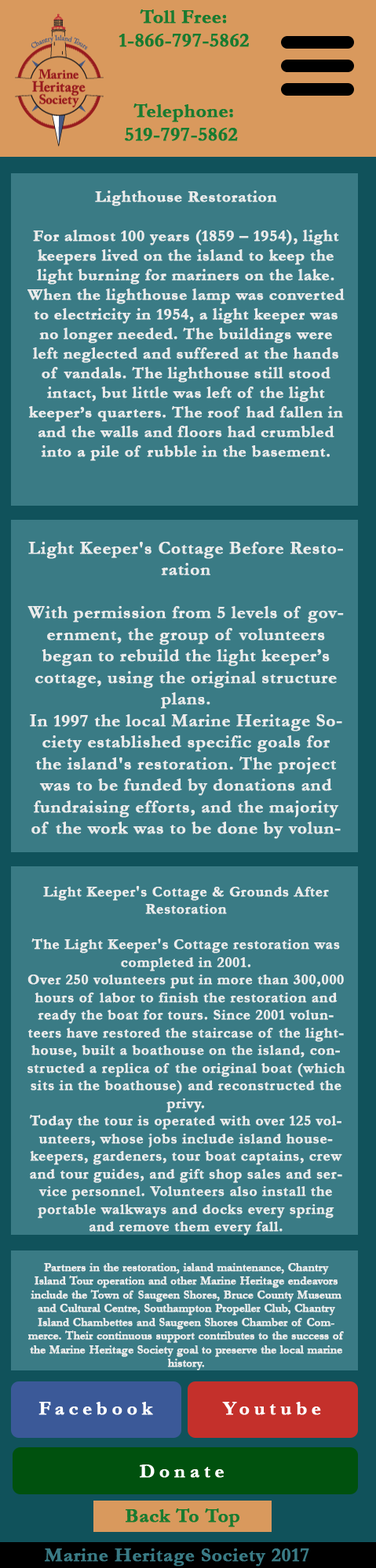
<style>
.page{position:relative;width:376px;height:1568px;background:#3a7b85}
.page>*{position:absolute;margin:0}
.t1{font:19.6px "Garamond-Bold";color:#197b30;font-weight:bold}
.t2{font:16.3px "Garamond-Bold";color:#ebebeb;font-weight:bold}
.t3{font:13.1px "Garamond-Bold";color:#ebebeb;font-weight:bold}
.t4{font:18px "Garamond-Bold";color:#ebebeb;font-weight:bold}
.t5{font:14.7px "Garamond-Bold";color:#ebebeb;font-weight:bold}
.t6{font:11.4px "Garamond-Bold";color:#ebebeb;font-weight:bold}
.t7{font:9.8px "Garamond-Bold";color:#ebebeb;font-weight:bold}
.t8{font:19.6px "Garamond-Bold";letter-spacing:0.2em;color:#fefefe;font-weight:bold}
.t9{font:19.6px "Garamond-Bold";letter-spacing:0.2em;color:#ffffff;font-weight:bold}
.t10{font:19.6px "Garamond-Bold";color:#3a7b85;font-weight:bold}
</style>
<div class="page">
<p class="t1" style="left:118px;top:9px;width:131px;height:38px;text-align:center">Toll Free:<br>1-866-797-5862</p>
<p class="t1" style="left:125px;top:103px;width:113px;height:38px;text-align:center">Telephone:<br>519-797-5862</p>
<p class="t2" style="left:27px;top:191px;width:317px;height:270px;text-align:center"><span class="t3"><br></span>Lighthouse Restoration<br><br>For almost 100 years (1859 – 1954), light keepers lived on the island to keep the light burning for mariners on the lake. When the lighthouse lamp was converted to electricity in 1954, a light keeper was no longer needed. The buildings were left neglected and suffered at the hands of vandals. The lighthouse still stood intact, but little was left of the light keeper’s quarters. The roof had fallen in and the walls and floors had crumbled into a pile of rubble in the basement.</p>
<p class="t4" style="left:27px;top:542px;width:316px;height:297px;text-align:center">Light Keeper's Cottage Before Restoration<br><br>With permission from 5 levels of government, the group of volunteers began to rebuild the light keeper’s cottage, using the original structure plans.<br>In 1997 the local Marine Heritage Society established specific goals for the island's restoration. The project was to be funded by donations and fundraising efforts, and the majority of the work was to be done by volunteers.</p>
<p class="t5" style="left:27px;top:886px;width:318px;height:350px;text-align:center"><span class="t4"><br></span>Light Keeper's Cottage &amp; Grounds After Restoration<br><br>The Light Keeper's Cottage restoration was completed in 2001. <br>Over 250 volunteers put in more than 300,000 hours of labor to finish the restoration and ready the boat for tours. Since 2001 volunteers have restored the staircase of the lighthouse, built a boathouse on the island, constructed a replica of the original boat (which sits in the boathouse) and reconstructed the privy.<br>Today the tour is operated with over 125 volunteers, whose jobs include island housekeepers, gardeners, tour boat captains, crew and tour guides, and gift shop sales and service personnel. Volunteers also install the portable walkways and docks every spring and remove them every fall.</p>
<p class="t6" style="left:27px;top:1263px;width:316px;height:107px;text-align:center"><span class="t7"><br></span>Partners in the restoration, island maintenance, Chantry Island Tour operation and other Marine Heritage endeavors include the Town of Saugeen Shores, Bruce County Museum and Cultural Centre, Southampton Propeller Club, Chantry Island Chambettes and Saugeen Shores Chamber of Commerce. Their continuous support contributes to the success of the Marine Heritage Society goal to preserve the local marine history.</p>
<p class="t8" style="left:38px;top:1402px;width:115px;height:13px">Facebook</p>
<p class="t9" style="left:222px;top:1402px;width:99px;height:13px">Youtube</p>
<p class="t9" style="left:140px;top:1465px;width:83px;height:13px">Donate</p>
<p class="t1" style="left:125px;top:1508px;width:114px;height:19px">Back To Top</p>
<p class="t10" style="left:45px;top:1548px;width:264px;height:18px">Marine Heritage Society 2017</p>
</div>
